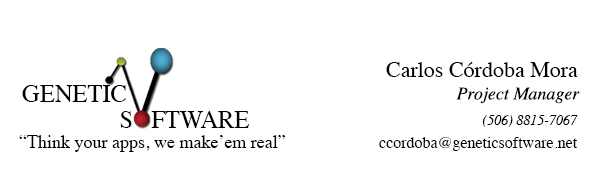
<style>
.page{position:relative;width:600px;height:171px;background:#ffffff}
.page>*{position:absolute;margin:0}
.t1{font:22px "Times-Roman";color:#000000}
.t2{font:24.5px "Times-Roman";color:#000000}
.t3{font:18px "Times-Italic";color:#000000}
.t4{font:14px "Times-Italic";color:#000000}
.t5{font:18px "Times-Roman";color:#000000}
.t6{font:16px "Times-Roman";color:#000000}
</style>
<div class="page">
<p class="t1" style="left:386px;top:62px;width:192px;height:15px">Carlos Córdoba Mora</p>
<p class="t2" style="left:22px;top:85px;width:104px;height:17px">GENETIC</p>
<p class="t3" style="left:456px;top:87px;width:124px;height:17px">Project Manager</p>
<p class="t2" style="left:120px;top:111px;width:129px;height:17px">S   FTWARE</p>
<p class="t4" style="left:482px;top:115px;width:96px;height:12px">(506) 8815-7067</p>
<p class="t5" style="left:19px;top:135px;width:266px;height:17px">“Think your apps, we make’em real”</p>
<p class="t6" style="left:379px;top:137px;width:199px;height:14px">ccordoba@geneticsoftware.net</p>
</div>
